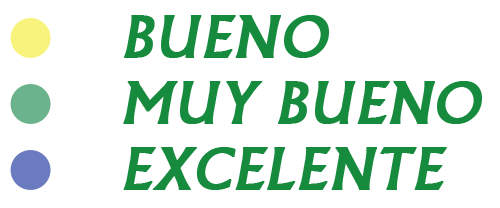
<style>
.page{position:relative;width:500px;height:208px;background:#ffffff}
.page>*{position:absolute;margin:0}
.t1{font:61.1px "Narkisim";color:#168a3d;font-weight:bold;font-style:italic}
</style>
<div class="page">
<p class="t1" style="left:124px;top:15px;width:205px;height:43px">BUENO</p>
<p class="t1" style="left:123px;top:81px;width:359px;height:43px">MUY BUENO</p>
<p class="t1" style="left:123px;top:147px;width:324px;height:43px">EXCELENTE</p>
</div>
